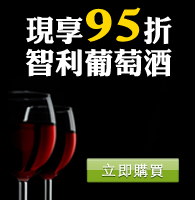
<style>
.page{position:relative;width:195px;height:200px;background:#000000}
.page>*{position:absolute;margin:0}
.t1{font:29.5px/32.4px "DFLiKingHeiStd-W8";color:#ffffff}
.t2{font:47.2px/78.7px "DFLiKingHeiStd-W8";color:#ffd801}
.t3{font:14.6px "STHeitiTC-Light";letter-spacing:0.075em;color:#ffffff;font-weight:bold}
</style>
<div class="page">
<p class="t1" style="left:26px;top:7px;width:146px;height:70px">現享<span class="t2">95</span>折<br>智利葡萄酒</p>
<p class="t3" style="left:102px;top:163px;width:61px;height:15px">立即購買</p>
</div>
